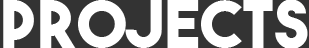
<style>
.page{position:relative;width:309px;height:48px;background:#ffffff}
.page>*{position:absolute;margin:0}
.t1{font:65.5px "TheBoldFont";color:#ffffff}
</style>
<div class="page">
<p class="t1" style="left:3px;top:0px;width:305px;height:49px">Projects</p>
</div>
